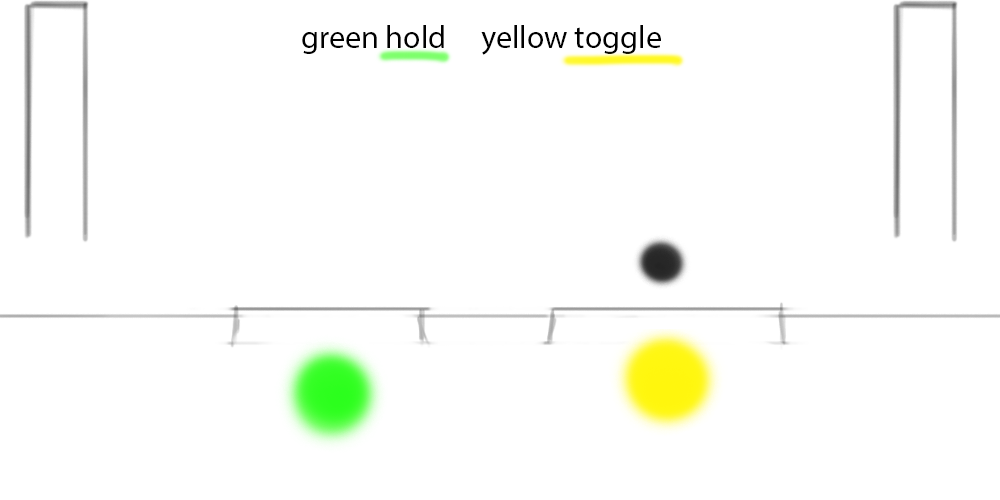
<style>
.page{position:relative;width:1000px;height:500px;background:#ffffff}
.page>*{position:absolute;margin:0}
.t1{font:32px "MyriadPro-Regular";color:#000000}
</style>
<div class="page">
<p class="t1" style="left:302px;top:25px;width:359px;height:30px">green hold yellow toggle</p>
</div>
